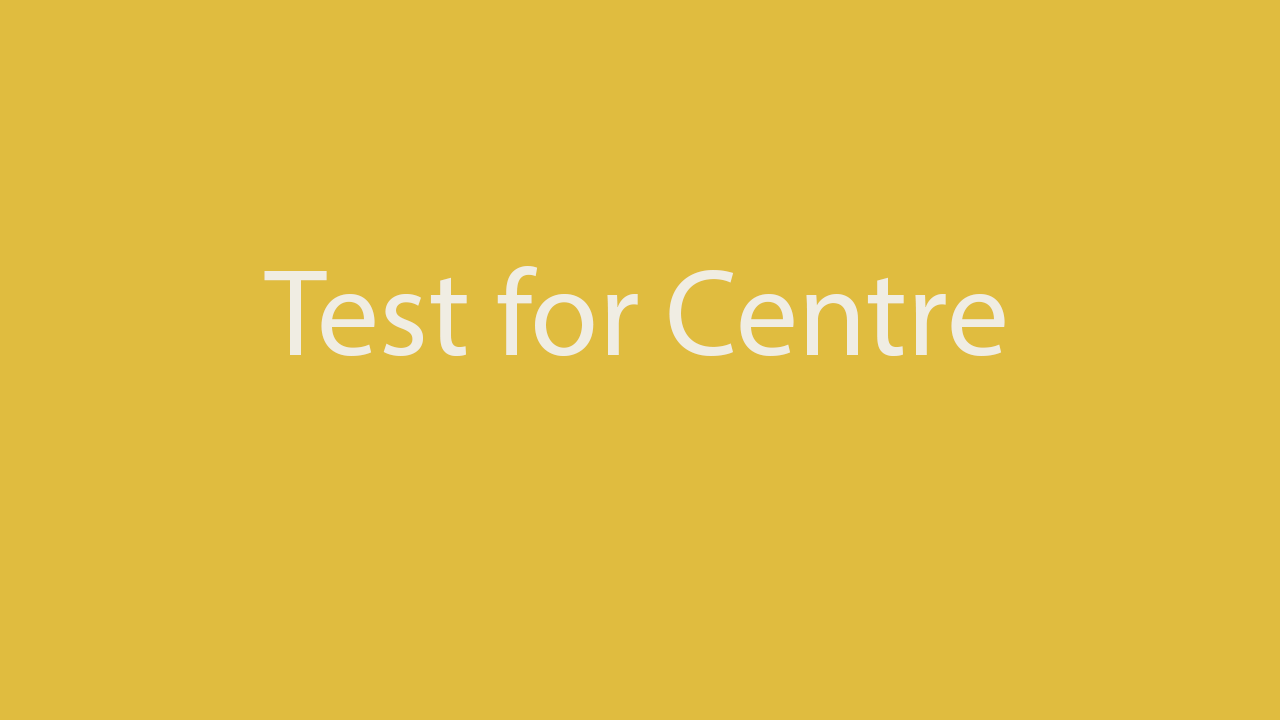
<style>
.page{position:relative;width:1280px;height:720px;background:#e0bc3f}
.page>*{position:absolute;margin:0}
.t1{font:124px "MyriadPro-Regular";color:#f0ede3}
</style>
<div class="page">
<p class="t1" style="left:264px;top:266px;width:741px;height:91px">Test for Centre</p>
</div>
